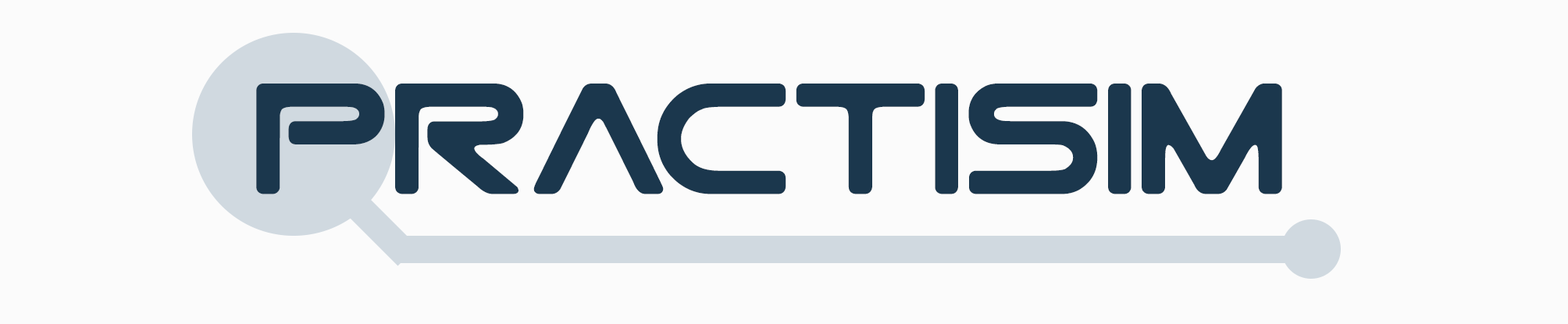
<style>
.page{position:relative;width:1568px;height:324px;background:#fbfbfb}
.page>*{position:absolute;margin:0}
.t1{font:156.2px "GtekTechnology";color:#1b374d;font-weight:bold}
</style>
<div class="page">
<p class="t1" style="left:256px;top:84px;width:1026px;height:110px">practisim</p>
</div>
